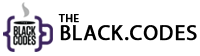
<style>
.page{position:relative;width:200px;height:56px;background:#ffffff}
.page>*{position:absolute;margin:0}
.t1{font:21.6px/18px "MyriadPro-Regular";letter-spacing:0.025em;color:#000000;font-weight:bold}
.t2{font:10.8px/18px "MyriadPro-Regular";letter-spacing:0.075em;color:#000000;font-weight:bold}
</style>
<div class="page">
<p class="t1" style="left:58px;top:14px;width:139px;height:27px"><span class="t2">THE<br></span>BLACK.CODES</p>
</div>
